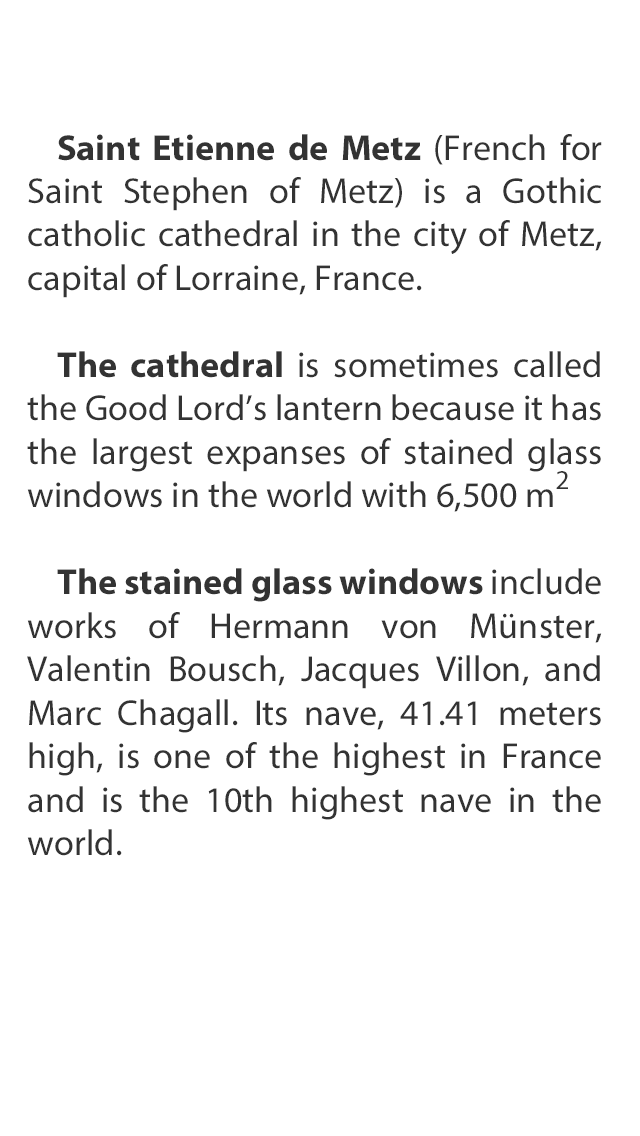
<style>
.page{position:relative;width:640px;height:1136px;background:#ffffff}
.page>*{position:absolute;margin:0}
.t1{font:36.2px "MyriadPro-Regular";color:#333333}
.t2{font:36.2px "MyriadPro-Bold";color:#333333}
.t3{font:27.2px "MyriadPro-Regular";color:#333333}
</style>
<div class="page">
<p class="t1" style="left:27px;top:134px;width:575px;height:722px;text-align:justify"><span class="t2">Saint Etienne de Metz </span>(French for Saint Stephen of Metz) is a Gothic catholic cathedral in the city of Metz, capital of Lorraine, France.<span class="t2"><br><br>The cathedral </span>is sometimes called the Good Lord’s lantern because it has the largest expanses of stained glass windows in the world with 6,500 m<span class="t3">2 <br></span><span class="t2"><br>The stained glass windows </span>include works of Hermann von Münster, Valentin Bousch, Jacques Villon, and Marc Chagall. Its nave, 41.41 meters high, is one of the highest in France and is the 10th highest nave in the world.</p>
</div>
